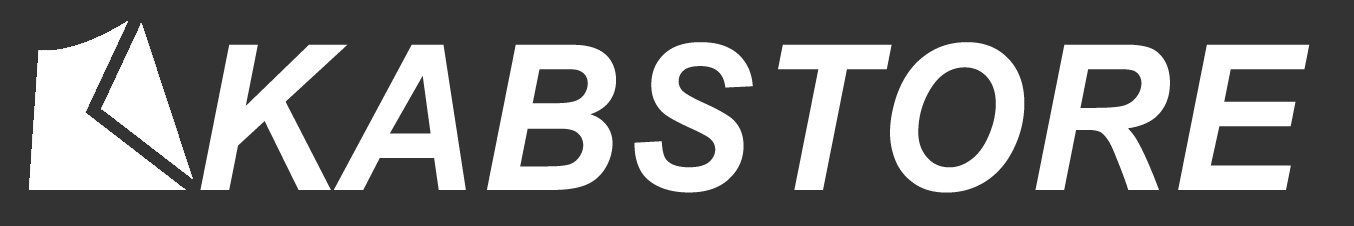
<style>
.page{position:relative;width:1354px;height:226px;background:#333333}
.page>*{position:absolute;margin:0}
.t1{font:202.7px "Arial-BoldItalicMT";letter-spacing:0.022em;color:#ffffff;scale:0.95 1}
</style>
<div class="page">
<p class="t1" style="left:200px;top:42px;width:1110px;height:151px">KABSTORE</p>
</div>
